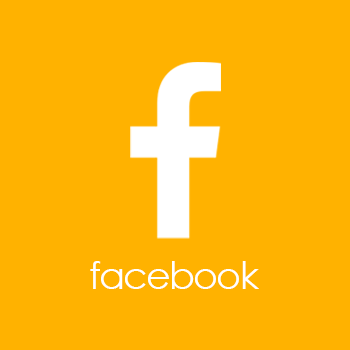
<style>
.page{position:relative;width:350px;height:350px;background:#ffb200}
.page>*{position:absolute;margin:0}
.t1{font:37.7px "CenturyGothic";letter-spacing:-0.05em;color:#ffffff}
</style>
<div class="page">
<p class="t1" style="left:90px;top:261px;width:169px;height:28px">facebook</p>
</div>
